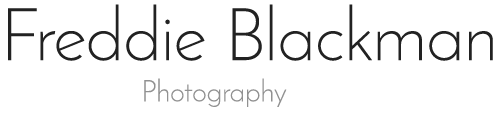
<style>
.page{position:relative;width:500px;height:130px;background:#ffffff}
.page>*{position:absolute;margin:0}
.t1{font:73px "JosefinSans-Light";color:#222222}
.t2{font:30px "JosefinSans-Light";color:#919191}
</style>
<div class="page">
<p class="t1" style="left:8px;top:4px;width:485px;height:57px">Freddie Blackman</p>
<p class="t2" style="left:144px;top:78px;width:143px;height:29px">Photography</p>
</div>
